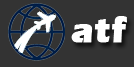
<style>
.page{position:relative;width:134px;height:67px;background:#333333}
.page>*{position:absolute;margin:0}
.t1{font:37.2px "ErasITC-Bold";color:#ffffff;font-weight:bold;scale:0.97 1}
</style>
<div class="page">
<p class="t1" style="left:71px;top:16px;width:56px;height:27px">atf</p>
</div>
